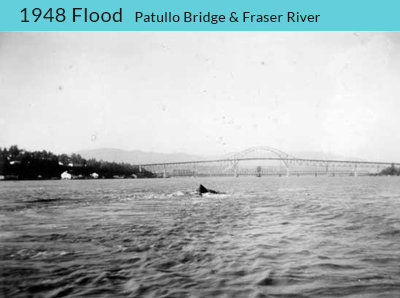
<style>
.page{position:relative;width:400px;height:298px}
.page>*{position:absolute;margin:0}
.t1{font:20px "Lato-Regular";letter-spacing:0.025em;color:#1a1a1a}
.t2{font:14px "Lato-Regular";letter-spacing:0.025em;color:#1a1a1a}
</style>
<div class="page">
<p class="t1" style="left:20px;top:8px;width:102px;height:14px">1948 Flood</p>
<p class="t2" style="left:135px;top:12px;width:186px;height:12px">Patullo Bridge &amp; Fraser River</p>
</div>
